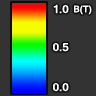
<style>
.page{position:relative;width:96px;height:96px;background:#333333}
.page>*{position:absolute;margin:0}
.t1{font:12px "Gautami-Bold";letter-spacing:-0.01em;color:#ffffff}
.t2{font:10px "Gautami-Bold";letter-spacing:-0.01em;color:#ffffff}
</style>
<div class="page">
<p class="t1" style="left:53px;top:4px;width:16px;height:10px">1.0</p>
<p class="t2" style="left:74px;top:5px;width:18px;height:10px">B(T)</p>
<p class="t1" style="left:53px;top:42px;width:16px;height:10px">0.5</p>
<p class="t1" style="left:53px;top:82px;width:16px;height:10px">0.0</p>
</div>
